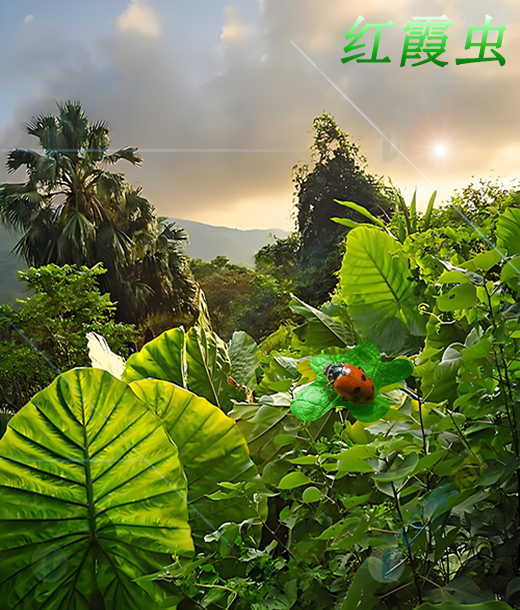
<style>
.page{position:relative;width:520px;height:610px}
.page>*{position:absolute;margin:0}
.t1{font:56px "SimSun";font-weight:bold;font-style:italic}
</style>
<div class="page">
<p class="t1" style="left:340px;top:14px;width:166px;height:54px">红霞虫</p>
</div>
